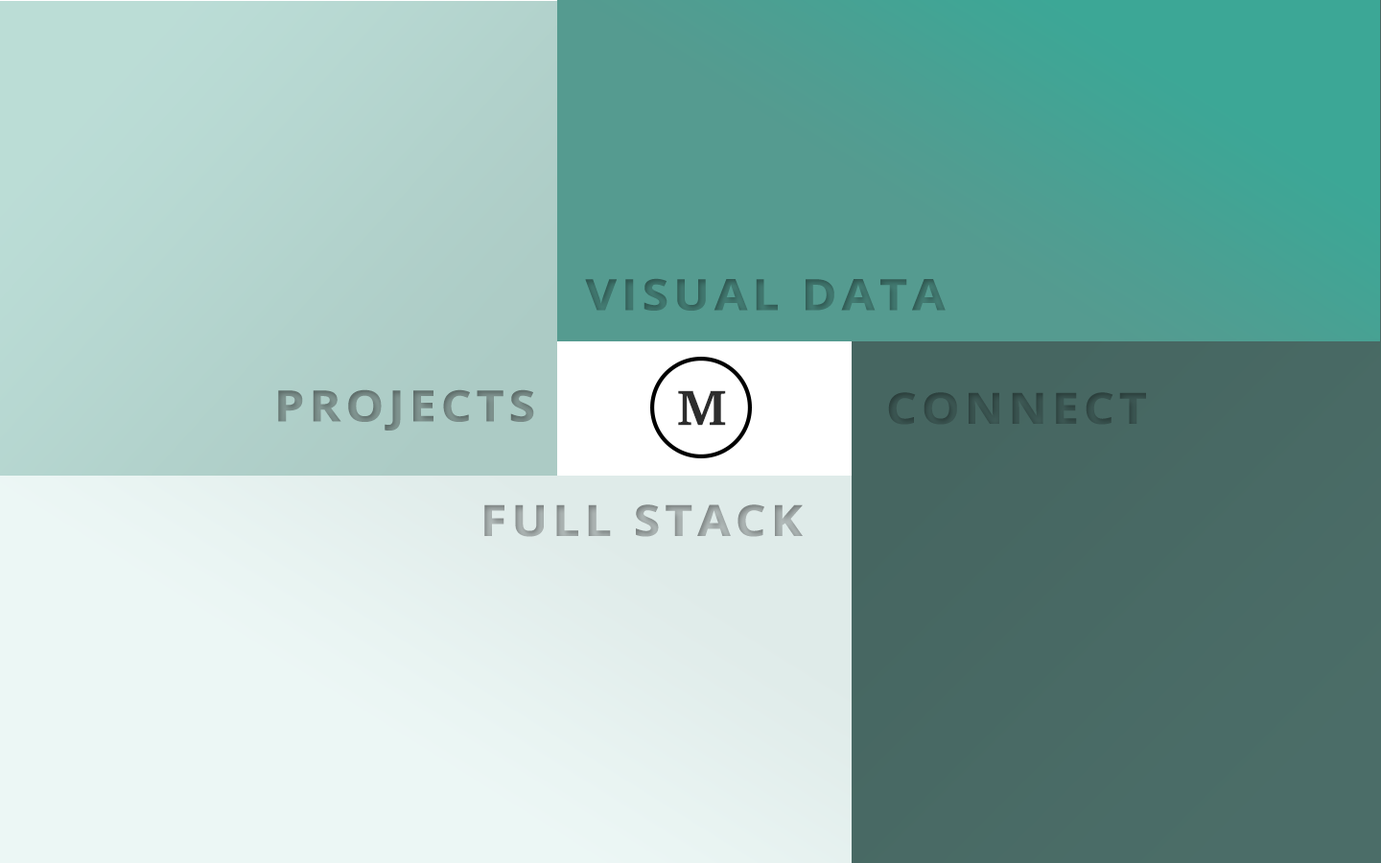
<style>
.page{position:relative;width:1381px;height:863px}
.page>*{position:absolute;margin:0}
.t1{font:43.2px "OpenSans-Bold";letter-spacing:0.1em;color:#457f76;scale:1.11 1}
.t2{font:43.2px "OpenSans-Bold";letter-spacing:0.1em;color:#879c98;scale:1.11 1}
.t3{font:50.4px "Charter-Bold";letter-spacing:0.1em;color:#2d2d2d;scale:1.11 1}
.t4{font:43.2px "OpenSans-Bold";letter-spacing:0.1em;color:#3e5a56;scale:1.11 1}
.t5{font:43.2px "OpenSans-Bold";letter-spacing:0.1em;color:#9ea5a5;scale:1.11 1}
</style>
<div class="page">
<p class="t1" style="left:585px;top:278px;width:361px;height:33px">VISUAL DATA</p>
<p class="t2" style="left:278px;top:389px;width:256px;height:42px">PROJECTS</p>
<p class="t3" style="left:678px;top:390px;width:48px;height:36px">M</p>
<p class="t4" style="left:888px;top:392px;width:258px;height:33px">CONNECT</p>
<p class="t5" style="left:484px;top:505px;width:319px;height:32px">FULL STACK</p>
</div>
